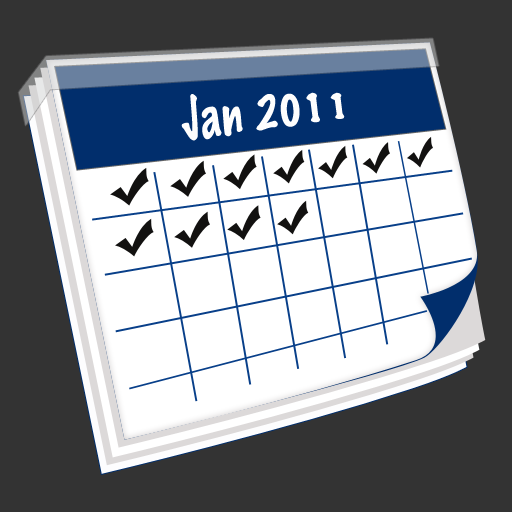
<style>
.page{position:relative;width:512px;height:512px;background:#333333}
.page>*{position:absolute;margin:0}
.t1{font:42.8px "MarkerFelt-Thin";color:#fefefe}
</style>
<div class="page">
<p class="t1" style="left:181px;top:92px;width:164px;height:49px;rotate:-4deg">Jan 2011</p>
</div>
